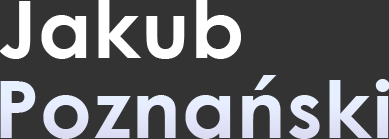
<style>
.page{position:relative;width:389px;height:139px;background:#333333}
.page>*{position:absolute;margin:0}
.t1{font:79px "CenturyGothic-Bold";letter-spacing:0.02em;color:#ffffff}
.t2{font:79px "CenturyGothic-Bold";letter-spacing:0.02em;color:#e5eafc}
</style>
<div class="page">
<p class="t1" style="left:0px;top:0px;width:241px;height:59px">Jakub</p>
<p class="t2" style="left:0px;top:75px;width:390px;height:64px">Poznański</p>
</div>
